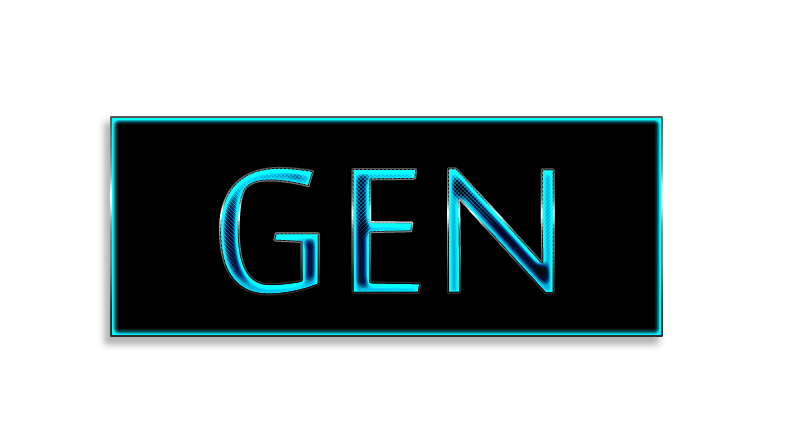
<style>
.page{position:relative;width:812px;height:446px;background:#ffffff}
.page>*{position:absolute;margin:0}
.t1{font:245.2px "SakkalMajalla";font-weight:bold}
</style>
<div class="page">
<p class="t1" style="left:220px;top:167px;width:334px;height:128px">GEN</p>
</div>
